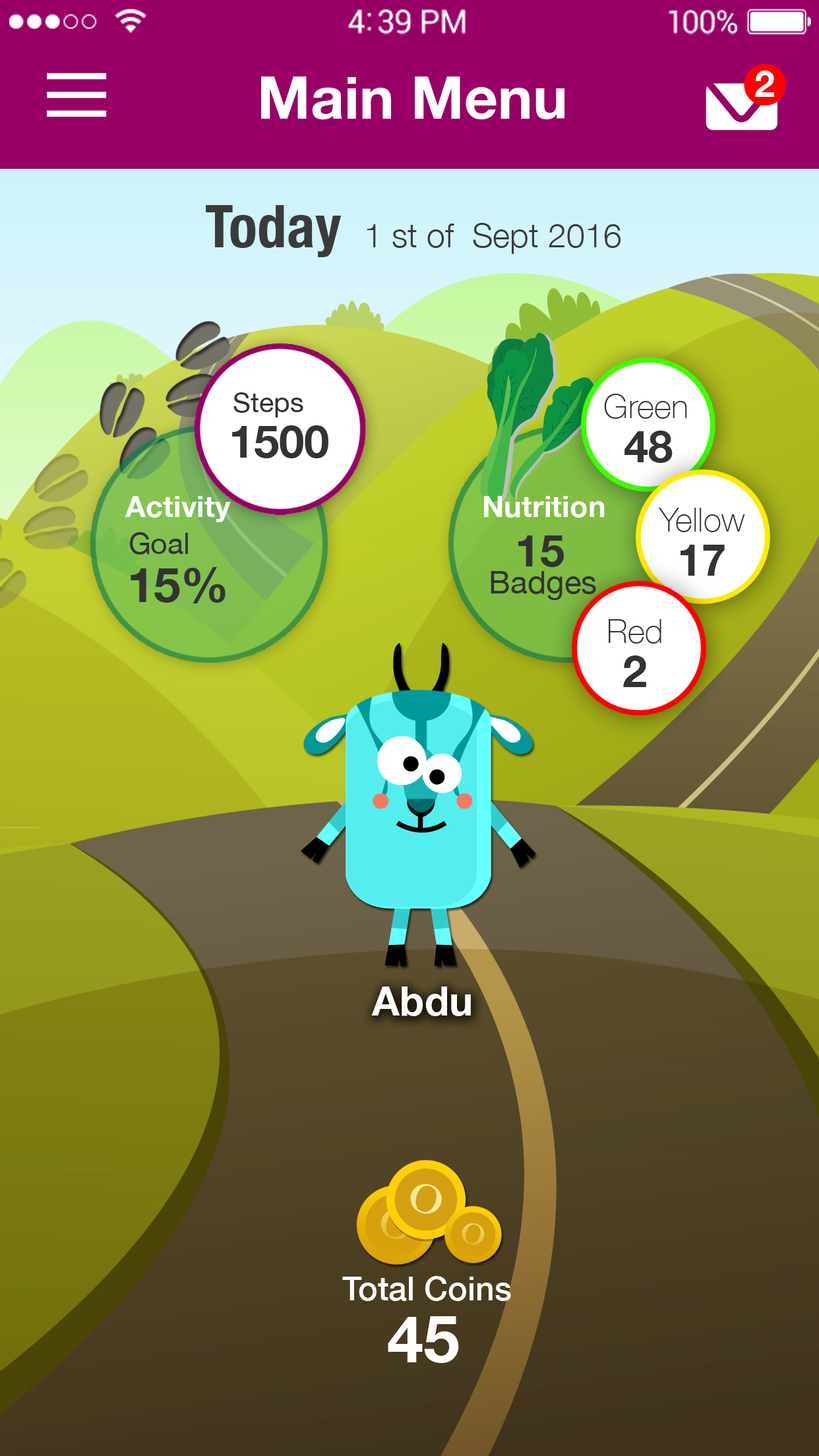
<style>
.page{position:relative;width:819px;height:1456px}
.page>*{position:absolute;margin:0}
.t1{font:58.8px "HelveticaNeue-Bold";color:#ffffff}
.t2{font:36.8px "HelveticaNeue-Bold";color:#ffffff}
.t3{font:33.1px "HelveticaNeue-Light";color:#3a3a3a}
.t4{font:58.8px "HelveticaNeue-CondensedBold";color:#3a3a3a}
.t5{font:27.3px "HelveticaNeue";color:#333333}
.t6{font:33.1px "HelveticaNeue-Thin";color:#333333}
.t7{font:45.2px "HelveticaNeue-Bold";color:#333333}
.t8{font:44.1px "HelveticaNeue-Bold";color:#333333}
.t9{font:29.9px "HelveticaNeue-Bold";color:#ffffff}
.t10{font:29.4px "HelveticaNeue";color:#333333}
.t11{font:44.3px "HelveticaNeue-Bold";color:#333333}
.t12{font:48.2px "HelveticaNeue-Bold";color:#333333}
.t13{font:31.6px "HelveticaNeue";color:#333333}
.t14{font:40.4px "HelveticaNeue-Bold";color:#ffffff}
.t15{font:33.1px "HelveticaNeue-Medium";color:#ffffff}
.t16{font:65.1px "HelveticaNeue-Bold";color:#ffffff}
</style>
<div class="page">
<p class="t1" style="left:261px;top:76px;width:303px;height:44px">Main Menu</p>
<p class="t2" style="left:755px;top:71px;width:19px;height:26px">2</p>
<p class="t3" style="left:206px;top:205px;width:415px;height:52px"><span class="t4">Today </span> 1 st of  Sept 2016</p>
<p class="t5" style="left:233px;top:392px;width:70px;height:25px">Steps</p>
<p class="t6" style="left:604px;top:394px;width:83px;height:25px">Green</p>
<p class="t7" style="left:232px;top:425px;width:96px;height:33px">1500</p>
<p class="t8" style="left:624px;top:431px;width:49px;height:32px">48</p>
<p class="t9" style="left:125px;top:496px;width:106px;height:26px">Activity</p>
<p class="t9" style="left:484px;top:496px;width:121px;height:22px">Nutrition</p>
<p class="t6" style="left:659px;top:508px;width:86px;height:24px">Yellow</p>
<p class="t10" style="left:129px;top:532px;width:59px;height:23px">Goal</p>
<p class="t11" style="left:518px;top:535px;width:46px;height:32px">15</p>
<p class="t8" style="left:681px;top:545px;width:44px;height:31px">17</p>
<p class="t12" style="left:131px;top:567px;width:95px;height:36px">15%</p>
<p class="t13" style="left:491px;top:571px;width:105px;height:29px">Badges</p>
<p class="t6" style="left:609px;top:619px;width:52px;height:25px">Red</p>
<p class="t8" style="left:623px;top:655px;width:23px;height:32px">2</p>
<p class="t14" style="left:371px;top:986px;width:100px;height:30px">Abdu</p>
<p class="t15" style="left:342px;top:1276px;width:169px;height:25px">Total Coins</p>
<p class="t16" style="left:388px;top:1316px;width:71px;height:47px">45</p>
</div>
